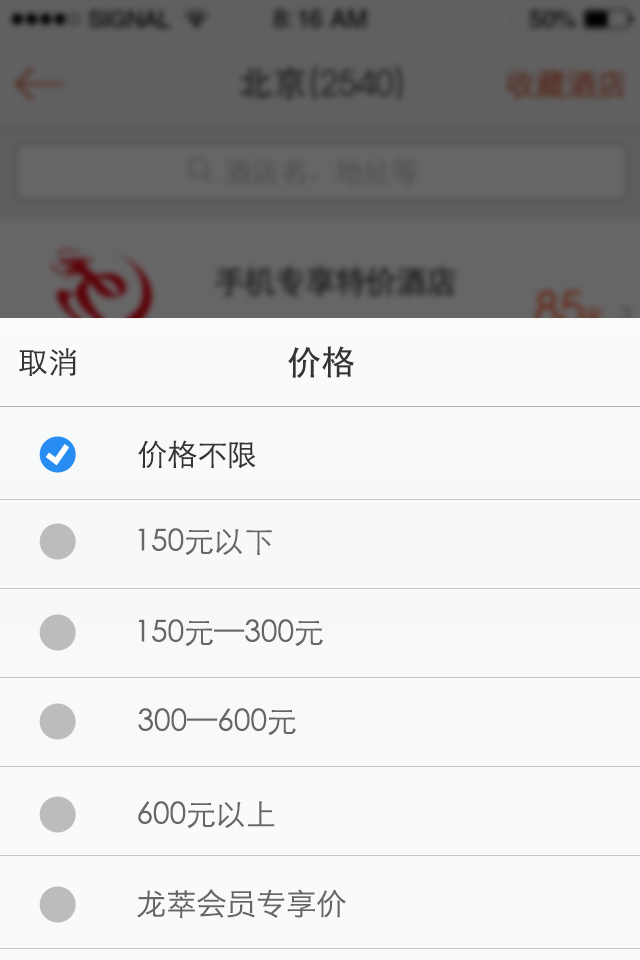
<style>
.page{position:relative;width:640px;height:960px}
.page>*{position:absolute;margin:0}
.t1{font:34px "AtillaNormal";color:#343434}
.t2{font:34px "STHeitiSC-Medium";color:#343434}
.t3{font:34px "STHeitiSC-Light";color:#343434}
.t4{font:30px "STHeitiSC-Light";color:#343434}
.t5{font:30px "STHeitiSC-Light";color:#666666}
.t6{font:30px "HiraginoSansGB-W3";color:#666666}
</style>
<div class="page">
<p class="t1" style="left:239px;top:66px;width:161px;height:33px"><span class="t2">北京</span><span class="t3">(</span>2540<span class="t3">)</span></p>
<p class="t4" style="left:19px;top:348px;width:58px;height:28px">取消</p>
<p class="t2" style="left:288px;top:346px;width:66px;height:32px">价格</p>
<p class="t4" style="left:138px;top:440px;width:118px;height:29px">价格不限</p>
<p class="t5" style="left:138px;top:528px;width:134px;height:28px">150元以下</p>
<p class="t5" style="left:138px;top:619px;width:185px;height:28px">150元—300元</p>
<p class="t5" style="left:138px;top:708px;width:158px;height:28px">300—600元</p>
<p class="t5" style="left:138px;top:801px;width:137px;height:28px">600元以上</p>
<p class="t6" style="left:137px;top:889px;width:209px;height:29px">龙萃会员专享价</p>
</div>
